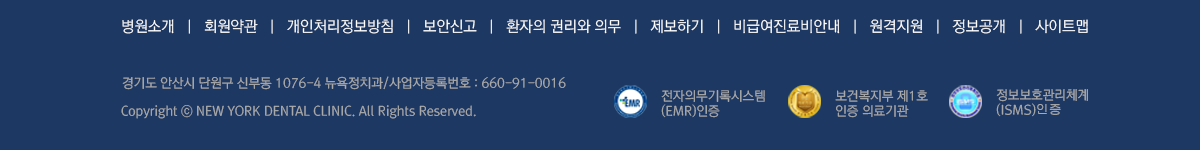
<style>
.page{position:relative;width:1200px;height:150px;background:#1d3963}
.page>*{position:absolute;margin:0}
.t1{font:15px "RixGoL";color:#ffffff}
.t2{font:13px "RixGoL";color:#aaaaaa}
.t3{font:13px "Gulim";color:#aaaaaa}
</style>
<div class="page">
<p class="t1" style="left:122px;top:19px;width:966px;height:15px">병원소개  ㅣ  회원약관  ㅣ  개인처리정보방침  ㅣ  보안신고  ㅣ  환자의 권리와 의무  ㅣ  제보하기  ㅣ  비급여진료비안내  ㅣ  원격지원  ㅣ  정보공개  ㅣ  사이트맵</p>
<p class="t2" style="left:122px;top:76px;width:444px;height:14px">경기도 안산시 단원구 신부동 1076-4 뉴욕정치과/사업자등록번호 : 660-91-0016</p>
<p class="t2" style="left:996px;top:89px;width:92px;height:28px">정보보호관리체계<br>(ISMS)<span class="t3">인증</span></p>
<p class="t2" style="left:661px;top:90px;width:104px;height:28px">전자의무기록시스템<br>(EMR)인증</p>
<p class="t2" style="left:835px;top:90px;width:93px;height:28px">보건복지부 제1호<br>인증 의료기관</p>
<p class="t2" style="left:121px;top:105px;width:355px;height:14px">Copyright ⓒ NEW YORK DENTAL CLINIC. All Rights Reserved.</p>
</div>
